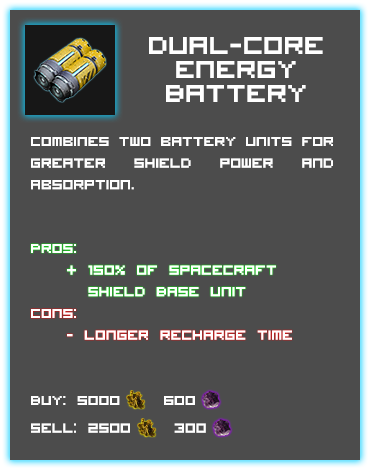
<style>
.page{position:relative;width:370px;height:470px;background:#4c4c4c}
.page>*{position:absolute;margin:0}
.t1{font:34px/12px "VisitorTT1BRK";color:#ffffff}
.t2{font:18px "VisitorTT1BRK";color:#ffffff}
</style>
<div class="page">
<p class="t1" style="left:149px;top:37px;width:174px;height:65px;text-align:center">Dual-core <br><br>Energy <br><br>Battery</p>
<p class="t2" style="left:31px;top:137px;width:302px;height:53px;text-align:justify">Combines two battery units for greater shield power and absorption.</p>
<p class="t2" style="left:31px;top:244px;width:245px;height:53px;text-align:justify">Pros:<br> + 150% of spacecraft              Shield Base unit</p>
<p class="t2" style="left:31px;top:309px;width:261px;height:31px;text-align:justify">Cons:<br> - longer recharge time</p>
<p class="t2" style="left:31px;top:396px;width:175px;height:37px">Buy: 5000    600<br><br>Sell: 2500    300</p>
</div>
